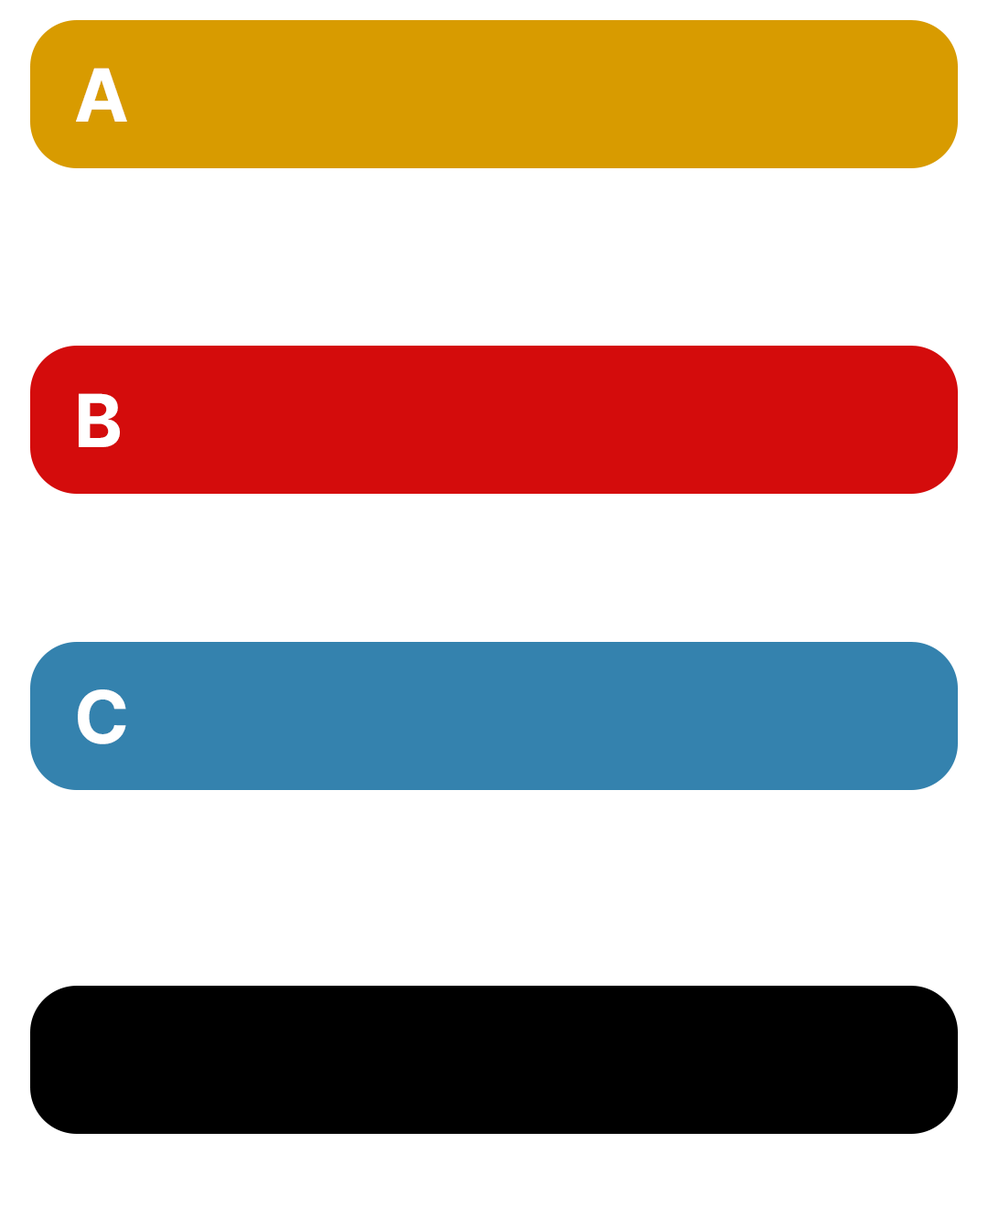
<style>
.page{position:relative;width:988px;height:1207px;background:#ffffff}
.page>*{position:absolute;margin:0}
.t1{font:73.2px "Inter-Bold";color:#ffffff}
</style>
<div class="page">
<p class="t1" style="left:76px;top:68px;width:51px;height:54px">A</p>
<p class="t1" style="left:79px;top:393px;width:41px;height:54px">B</p>
<p class="t1" style="left:78px;top:690px;width:48px;height:54px">C</p>
</div>
